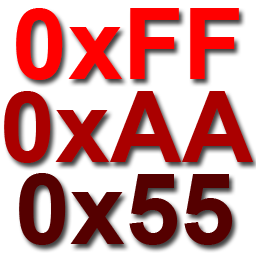
<style>
.page{position:relative;width:256px;height:256px;background:#ffffff}
.page>*{position:absolute;margin:0}
.t1{font:99px "Arial-BoldMT";color:#ff0000}
.t2{font:99px "Arial-BoldMT";color:#aa0000}
.t3{font:99px "Arial-BoldMT";color:#550000}
</style>
<div class="page">
<p class="t1" style="left:16px;top:8px;width:223px;height:72px">0xFF</p>
<p class="t2" style="left:4px;top:91px;width:249px;height:72px">0xAA</p>
<p class="t3" style="left:19px;top:173px;width:214px;height:72px">0x55</p>
</div>
